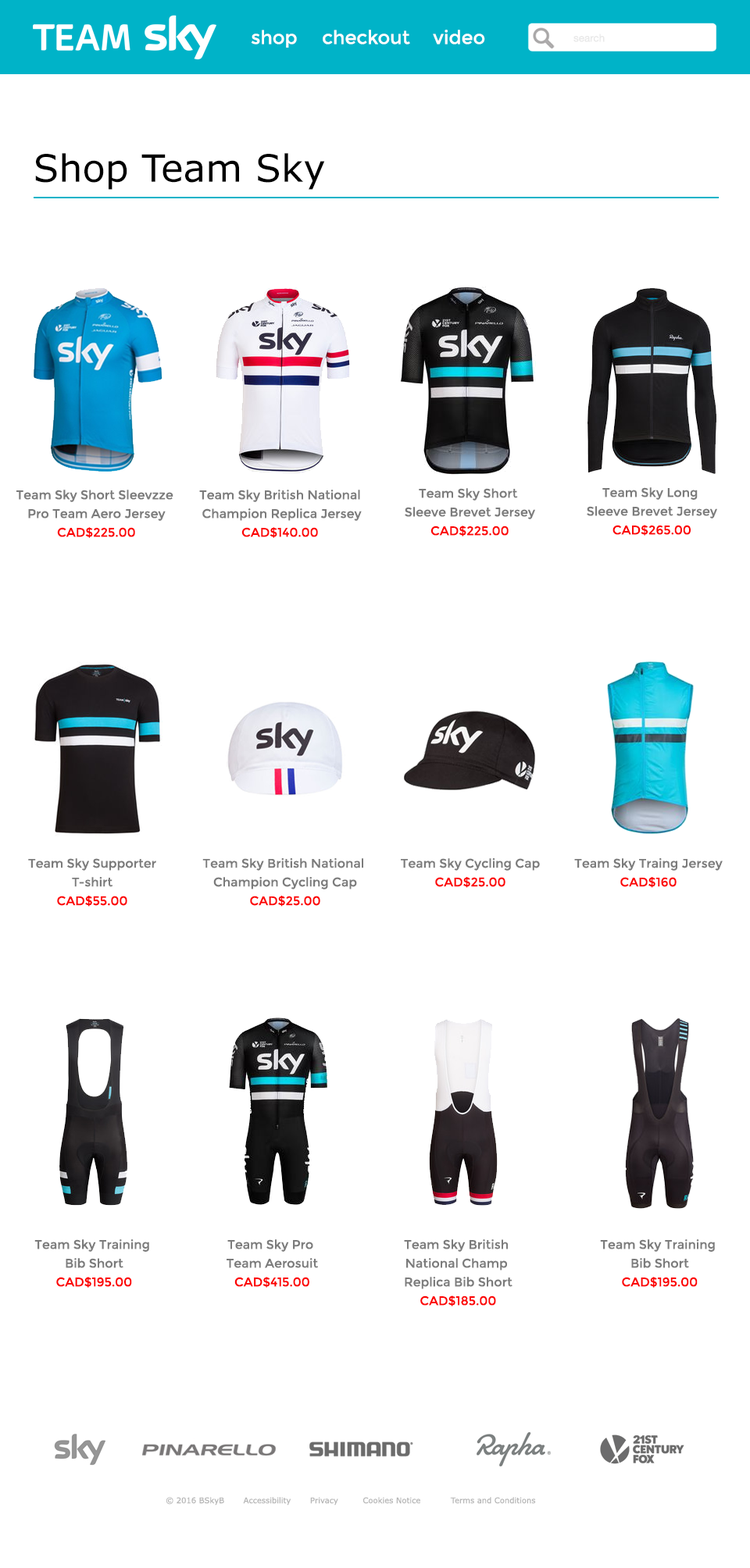
<style>
.page{position:relative;width:750px;height:1568px;background:#ffffff}
.page>*{position:absolute;margin:0}
.t1{font:18.7px "Montserrat-Regular";color:#fffefe}
.t2{font:10.5px "HelveticaNeue";color:#e8e8e8}
.t3{font:37.5px "Verdana";color:#000000}
.t4{font:12.5px/18.7px "Montserrat-Regular";color:#7c7c7c}
.t5{font:12.5px/18.7px "Montserrat-Regular";color:#fc0101}
.t6{font:7.8px "Verdana";color:#b5b5b5}
</style>
<div class="page">
<p class="t1" style="left:251px;top:30px;width:46px;height:18px">shop</p>
<p class="t1" style="left:323px;top:30px;width:87px;height:15px">checkout</p>
<p class="t1" style="left:433px;top:30px;width:52px;height:15px">video</p>
<p class="t2" style="left:573px;top:34px;width:31px;height:8px">search</p>
<p class="t3" style="left:35px;top:153px;width:290px;height:37px">Shop Team Sky</p>
<p class="t4" style="left:16px;top:490px;width:157px;height:48px;text-align:center">Team Sky Short Sleevzze <br>Pro Team Aero Jersey<br><span class="t5">CAD$225.00</span></p>
<p class="t4" style="left:199px;top:490px;width:163px;height:48px;text-align:center">Team Sky British National<br> Champion Replica Jersey<br><span class="t5">CAD$140.00</span></p>
<p class="t4" style="left:404px;top:488px;width:131px;height:48px;text-align:center">Team Sky Short <br>Sleeve Brevet Jersey<br><span class="t5">CAD$225.00</span></p>
<p class="t4" style="left:586px;top:487px;width:131px;height:49px;text-align:center">Team Sky Long <br>Sleeve Brevet Jersey<br><span class="t5">CAD$265.00</span></p>
<p class="t4" style="left:28px;top:858px;width:128px;height:49px;text-align:center">Team Sky Supporter<br>T-shirt<br><span class="t5">CAD$55.00</span></p>
<p class="t4" style="left:202px;top:858px;width:161px;height:49px;text-align:center">Team Sky British National <br>Champion Cycling Cap<br><span class="t5">CAD$25.00</span></p>
<p class="t4" style="left:401px;top:858px;width:139px;height:30px;text-align:center">Team Sky Cycling Cap<br><span class="t5">CAD$25.00</span></p>
<p class="t4" style="left:574px;top:858px;width:148px;height:30px;text-align:center">Team Sky Traing Jersey<br><span class="t5">CAD$160</span></p>
<p class="t4" style="left:34px;top:1239px;width:115px;height:49px;text-align:center">Team Sky Training <br>Bib Short<br><span class="t5">CAD$195.00</span></p>
<p class="t4" style="left:226px;top:1239px;width:92px;height:49px;text-align:center">Team Sky Pro <br>Team Aerosuit<br><span class="t5">CAD$415.00</span></p>
<p class="t4" style="left:404px;top:1239px;width:108px;height:67px;text-align:center">Team Sky British <br>National Champ <br>Replica Bib Short<br><span class="t5">CAD$185.00</span></p>
<p class="t4" style="left:600px;top:1239px;width:115px;height:49px;text-align:center">Team Sky Training <br>Bib Short<br><span class="t5">CAD$195.00</span></p>
<p class="t6" style="left:166px;top:1497px;width:370px;height:9px">© 2016 BSkyB       Accessibility       Privacy         Cookies Notice           Terms and Conditions</p>
</div>
